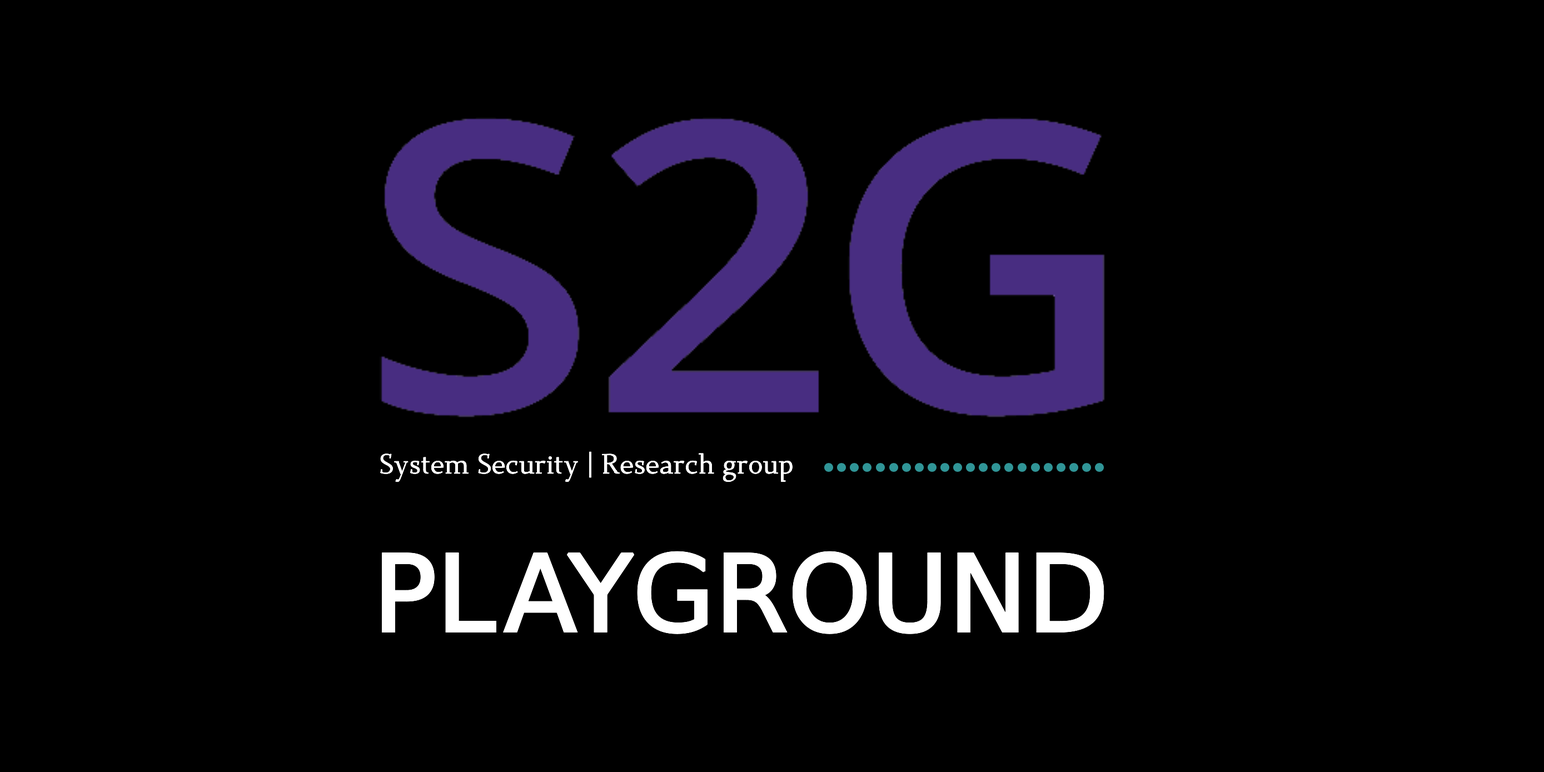
<style>
.page{position:relative;width:1544px;height:772px;background:#000000}
.page>*{position:absolute;margin:0}
.t1{font:27.2px "Dehuti-Book";color:#ffffff}
.t2{font:105.6px "DejaVuSans";color:#ffffff}
</style>
<div class="page">
<p class="t1" style="left:380px;top:451px;width:413px;height:32px">System Security | Research group</p>
<p class="t2" style="left:381px;top:551px;width:724px;height:84px">PL AYGROUND</p>
</div>
